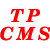
<style>
.page{position:relative;width:50px;height:50px;background:#ffffff}
.page>*{position:absolute;margin:0}
.t1{font:18px/18px "CenturySchlbkCyrillicBT-BoldIt";letter-spacing:0.2em;color:#ff0000}
</style>
<div class="page">
<p class="t1" style="left:0px;top:9px;width:51px;height:32px;text-align:center">TP<br>CMS</p>
</div>
